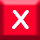
<style>
.page{position:relative;width:40px;height:40px;background:#ff022c}
.page>*{position:absolute;margin:0}
.t1{font:24px "ComicSansMS-Bold";color:#ffffff}
</style>
<div class="page">
<p class="t1" style="left:12px;top:10px;width:17px;height:19px">X</p>
</div>
